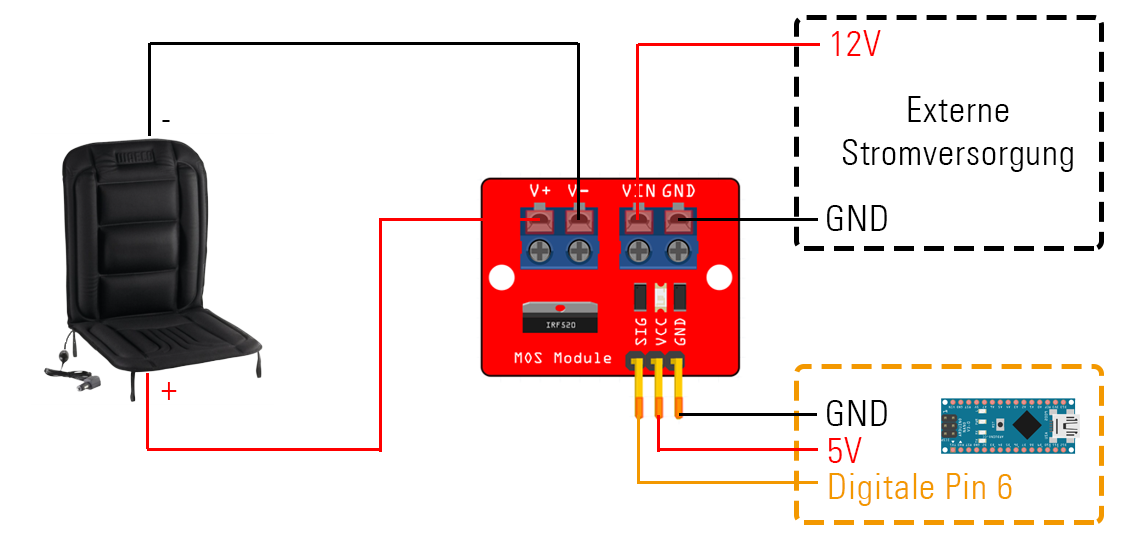
<style>
.page{position:relative;width:1130px;height:537px;background:#ffffff}
.page>*{position:absolute;margin:0}
.t1{font:36px "UniversLT-CondensedLight";letter-spacing:0.025em;color:#ff0000}
.t2{font:36px "UniversLT-CondensedLight";letter-spacing:0.025em;color:#000000}
.t3{font:36px "UniversLT-CondensedLight";letter-spacing:0.025em;color:#f39800}
</style>
<div class="page">
<p class="t1" style="left:832px;top:30px;width:49px;height:26px">12V</p>
<p class="t2" style="left:842px;top:96px;width:231px;height:76px;text-align:center">Externe<br>Stromversorgung</p>
<p class="t2" style="left:162px;top:120px;width:8px;height:2px">-</p>
<p class="t2" style="left:827px;top:205px;width:60px;height:26px">GND</p>
<p class="t1" style="left:161px;top:382px;width:16px;height:18px">+</p>
<p class="t2" style="left:827px;top:400px;width:60px;height:26px">GND</p>
<p class="t1" style="left:828px;top:437px;width:34px;height:26px">5V</p>
<p class="t3" style="left:829px;top:473px;width:183px;height:33px">Digitale Pin 6</p>
</div>
